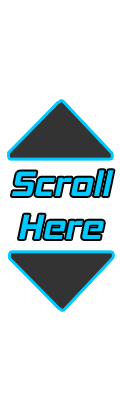
<style>
.page{position:relative;width:120px;height:400px;background:#ffffff}
.page>*{position:absolute;margin:0}
.t1{font:36px "HemiHeadRg-BoldItalic";color:#00c9ff}
</style>
<div class="page">
<p class="t1" style="left:11px;top:170px;width:103px;height:69px;text-align:center">Scroll Here</p>
</div>
